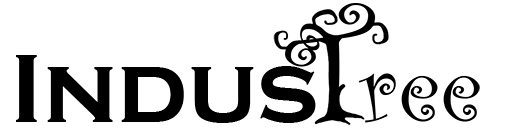
<style>
.page{position:relative;width:512px;height:128px;background:#ffffff}
.page>*{position:absolute;margin:0}
.t1{font:100px "CopperplateGothic-Bold";color:#000000}
</style>
<div class="page">
<p class="t1" style="left:16px;top:55px;width:300px;height:68px">Indus</p>
</div>
